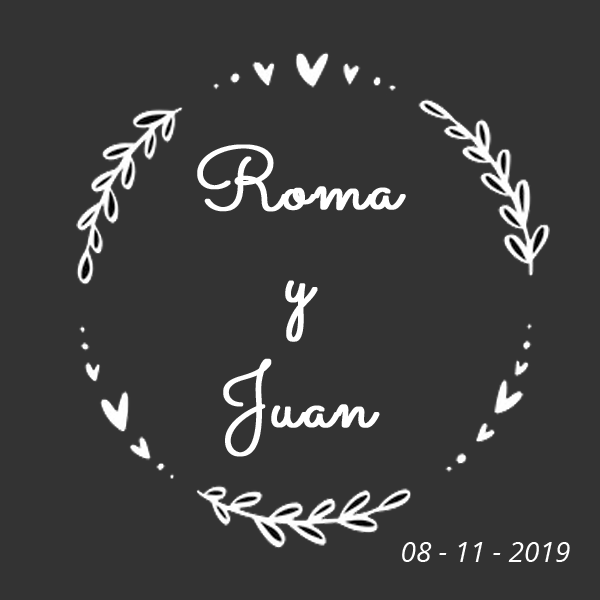
<style>
.page{position:relative;width:600px;height:600px;background:#333333}
.page>*{position:absolute;margin:0}
.t1{font:85.9px "Sacramento-Regular";color:#ffffff;font-weight:bold}
.t2{font:48px "OpenSans-Italic";color:#ffffff}
</style>
<div class="page">
<p class="t1" style="left:197px;top:144px;width:209px;height:68px">Roma</p>
<p class="t1" style="left:285px;top:280px;width:33px;height:62px">y</p>
<p class="t1" style="left:223px;top:358px;width:157px;height:99px">Juan</p>
<p class="t2" style="left:402px;top:542px;width:168px;height:20px">08 - 11 - 2019</p>
</div>
